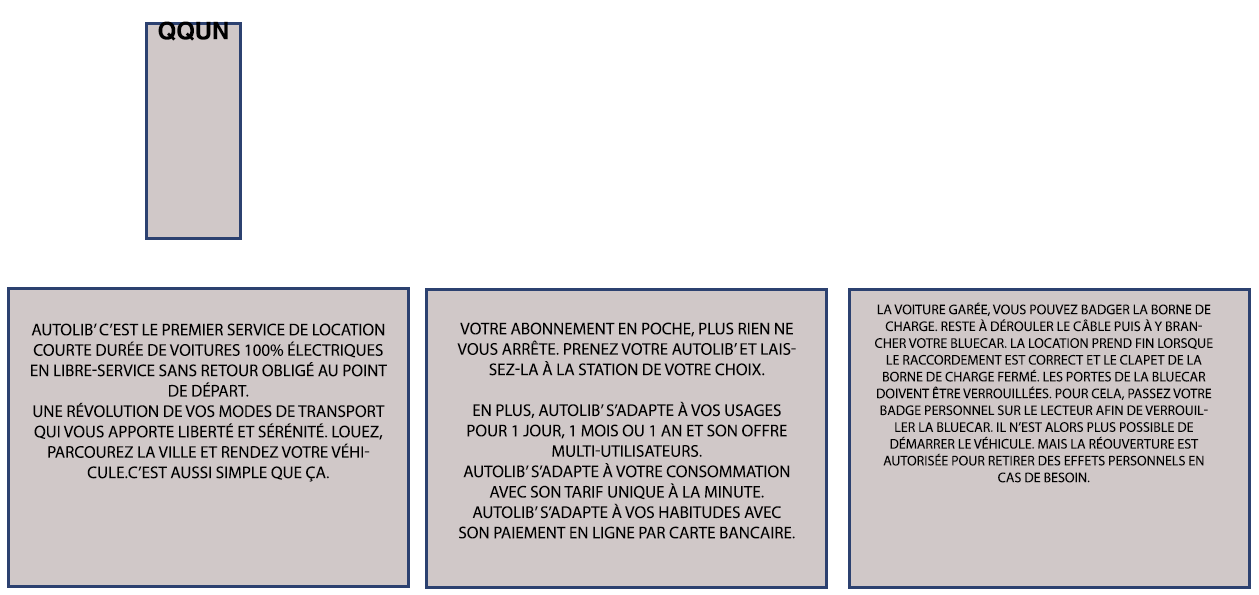
<style>
.page{position:relative;width:1259px;height:595px;background:#ffffff}
.page>*{position:absolute;margin:0}
.t1{font:24px "HelveticaLTStd-Bold";color:#000000;text-transform:uppercase}
.t2{font:14px "MyriadPro-Regular";color:#000000;text-transform:uppercase}
.t3{font:17px "MyriadPro-Regular";color:#000000;text-transform:uppercase}
</style>
<div class="page">
<p class="t1" style="left:158px;top:21px;width:70px;height:20px">QQUN</p>
<p class="t2" style="left:875px;top:302px;width:338px;height:181px;text-align:center">La voiture garée, vous pouvez badger la borne de charge. Reste à dérouler le câble puis à y brancher votre Bluecar. La location prend fin lorsque le raccordement est correct et le clapet de la borne de charge fermé. Les portes de la Bluecar doivent être verrouillées. Pour cela, passez votre badge personnel sur le lecteur afin de verrouiller la Bluecar. Il n’est alors plus possible de démarrer le véhicule. Mais la réouverture est autorisée pour retirer des effets personnels en cas de besoin.</p>
<p class="t3" style="left:31px;top:323px;width:356px;height:159px;text-align:center">Autolib’ c’est le premier service de location courte durée de voitures 100% électriques en libre-service sans retour obligé au point de départ. <br>Une révolution de vos modes de transport qui vous apporte liberté et sérénité. Louez, parcourez la ville et rendez votre véhicule.C’est aussi simple que ça.</p>
<p class="t3" style="left:457px;top:322px;width:339px;height:217px;text-align:center">Votre abonnement en poche, plus rien ne vous arrête. Prenez votre Autolib’ et laissez-la à la station de votre choix.<br><br>En plus, Autolib’ s’adapte à vos usages pour 1 jour, 1 mois ou 1 an et son offre multi-utilisateurs.<br>Autolib’ s’adapte à votre consommation avec son tarif unique à la minute.<br>Autolib’ s’adapte à vos habitudes avec son paiement en ligne par carte bancaire.</p>
</div>
